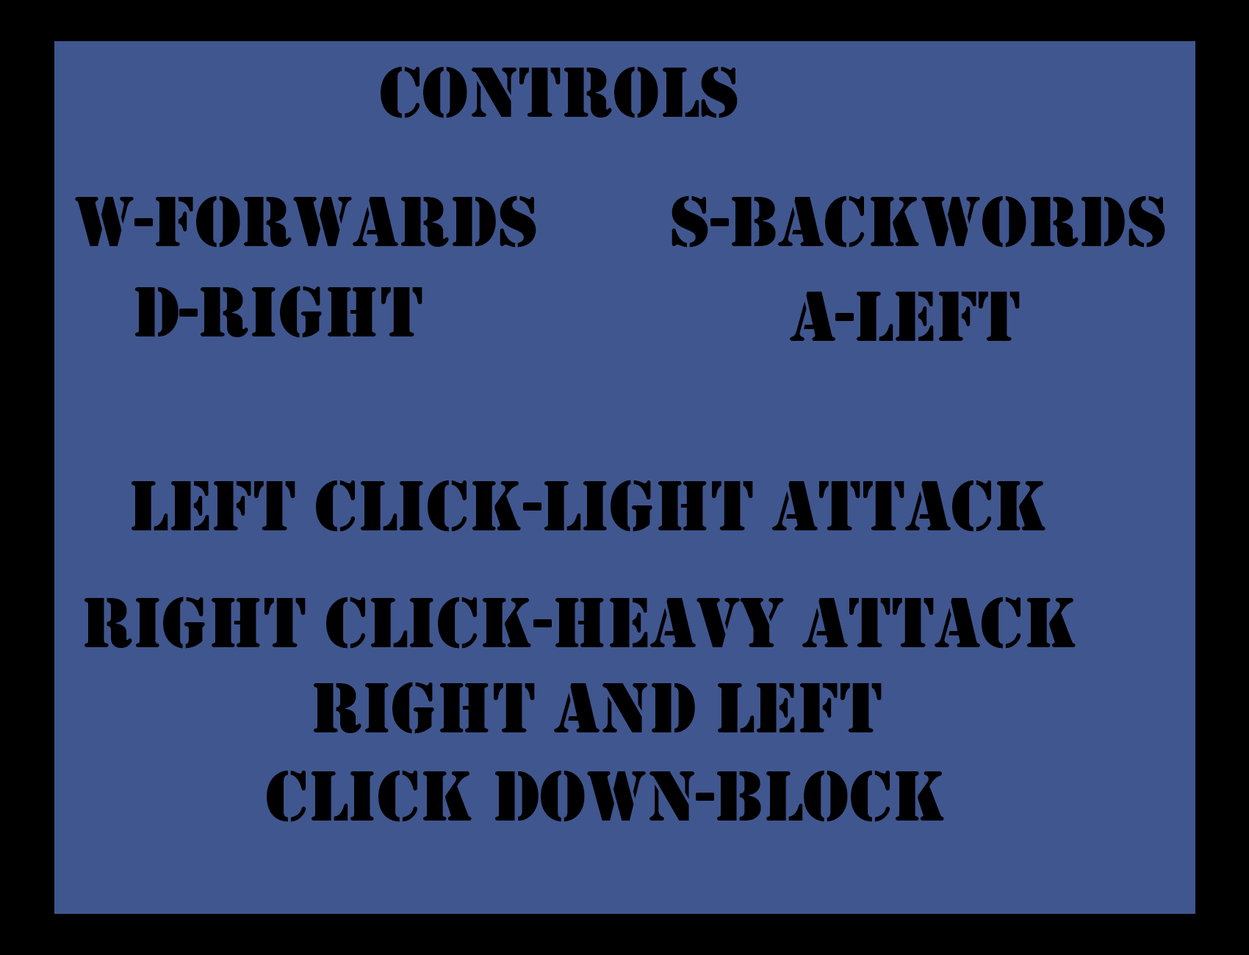
<style>
.page{position:relative;width:1249px;height:955px;background:#40568e}
.page>*{position:absolute;margin:0}
.t1{font:73.5px "Stencil";color:#000000}
</style>
<div class="page">
<p class="t1" style="left:380px;top:66px;width:357px;height:52px">Controls</p>
<p class="t1" style="left:75px;top:195px;width:461px;height:53px">W-Forwards</p>
<p class="t1" style="left:671px;top:195px;width:494px;height:53px">S-Backwords</p>
<p class="t1" style="left:135px;top:286px;width:287px;height:52px">D-Right</p>
<p class="t1" style="left:790px;top:292px;width:230px;height:49px">A-left</p>
<p class="t1" style="left:131px;top:480px;width:914px;height:52px">left Click-light attack</p>
<p class="t1" style="left:84px;top:596px;width:991px;height:53px">right click-heavy attack</p>
<p class="t1" style="left:267px;top:682px;width:677px;height:140px;text-align:center">right and left <br>click down-block</p>
</div>
